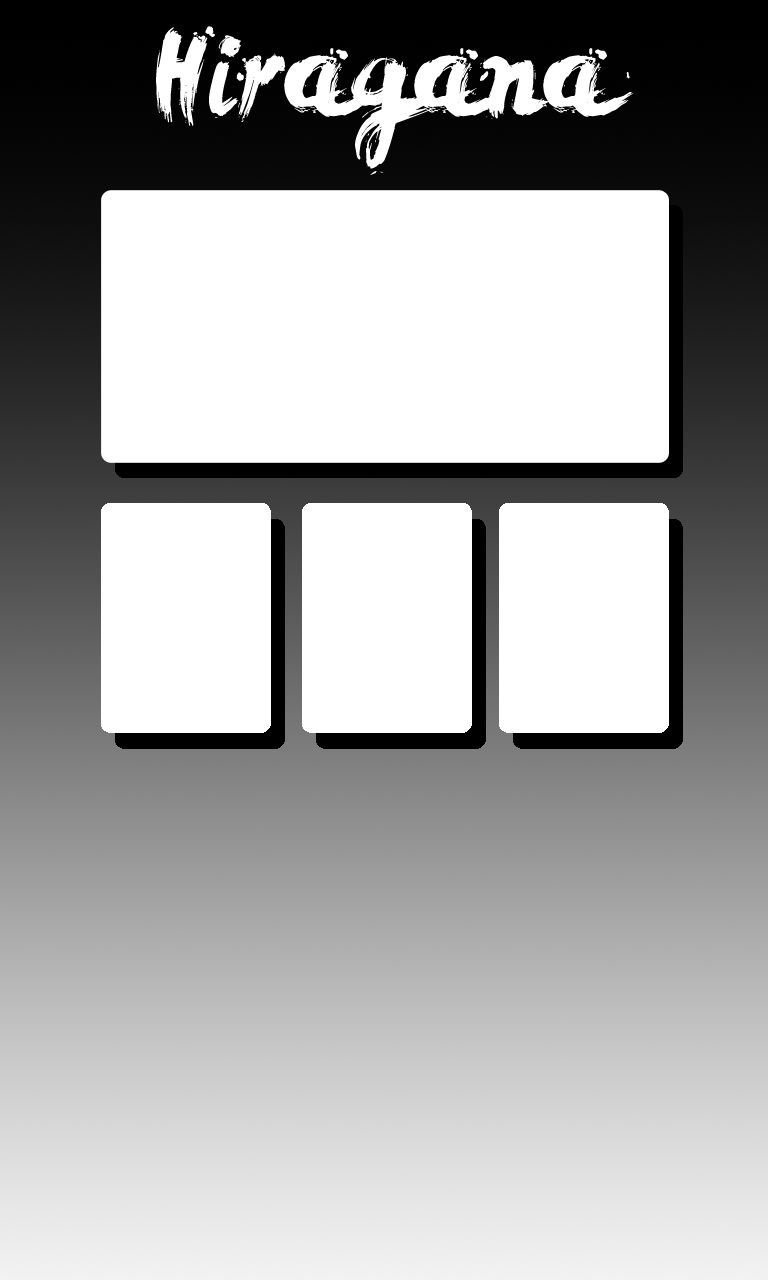
<style>
.page{position:relative;width:768px;height:1280px;background:#ffffff}
.page>*{position:absolute;margin:0}
.t1{font:118.4px "LeviReBrushed";color:#ffffff}
</style>
<div class="page">
<p class="t1" style="left:156px;top:26px;width:478px;height:149px">Hiragana</p>
</div>
